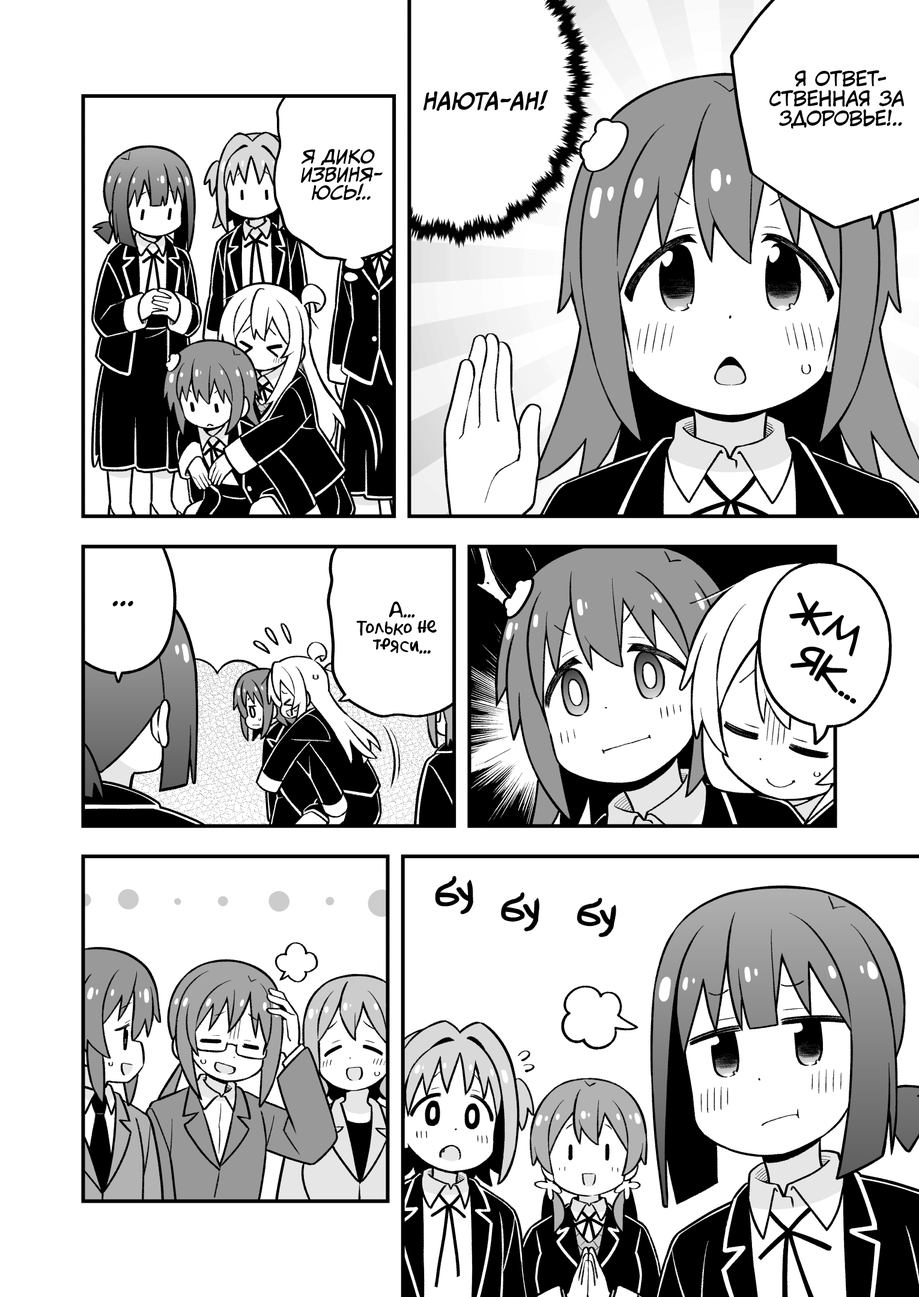
<style>
.page{position:relative;width:919px;height:1297px;background:#ffffff}
.page>*{position:absolute;margin:0}
.t1{font:19.8px "KuraiVoice2";color:#000000;text-transform:uppercase}
.t2{font:21.6px "CCMeanwhile";color:#000000;text-transform:uppercase;font-weight:bold;font-style:italic}
.t3{font:18px "CCMeanwhile";color:#000000;text-transform:uppercase;font-style:italic}
.t4{font:39.6px "v_Augie";color:#000000;text-transform:uppercase}
.t5{font:28.8px "KuraiVoice2";color:#000000;text-transform:uppercase}
.t6{font:18px "AkbarPlain";color:#000000}
.t7{font:43.2px "v_Augie";color:#000000}
</style>
<div class="page">
<p class="t1" style="left:769px;top:70px;width:135px;height:59px;text-align:center">Я ответ-<br>ственная за<br>здоровье!..</p>
<p class="t2" style="left:423px;top:90px;width:125px;height:21px">Наюта-ан!</p>
<p class="t3" style="left:301px;top:148px;width:82px;height:53px;text-align:center">Я дико<br>извиня-<br>юсь!..</p>
<p class="t4" style="left:790px;top:593px;width:70px;height:110px;text-align:center;rotate:31deg">жм<br>як...</p>
<p class="t5" style="left:112px;top:601px;width:21px;height:6px">...</p>
<p class="t6" style="left:356px;top:601px;width:81px;height:53px;text-align:center">А...<br>Только не<br>тряси...</p>
<p class="t7" style="left:435px;top:876px;width:38px;height:38px;rotate:-7deg">бу</p>
<p class="t7" style="left:502px;top:893px;width:37px;height:38px">бу</p>
<p class="t7" style="left:577px;top:899px;width:39px;height:38px;rotate:5deg">бу</p>
</div>
